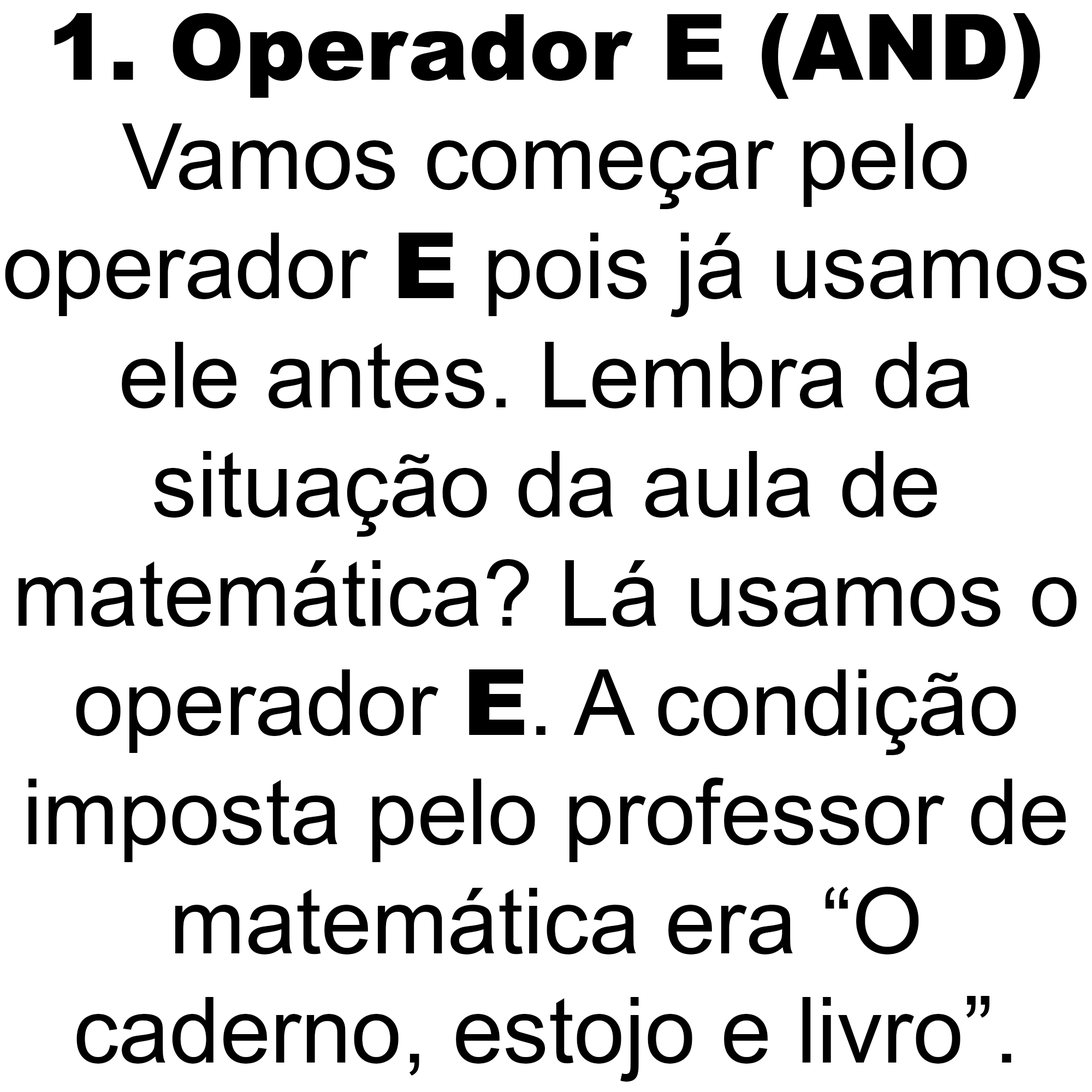
<style>
.page{position:relative;width:1092px;height:1092px;background:#ffffff}
.page>*{position:absolute;margin:0}
.t1{font:91px "ArialMT";color:#000000}
.t2{font:91px "Arial-Black";color:#000000}
</style>
<div class="page">
<p class="t1" style="left:5px;top:13px;width:1082px;height:1069px;text-align:center"><span class="t2">1. Operador E (AND)<br></span>Vamos começar pelo<br>operador <span class="t2">E</span> pois já usamos<br>ele antes. Lembra da<br>situação da aula de<br>matemática? Lá usamos o<br>operador <span class="t2">E</span>. A condição<br>imposta pelo professor de<br>matemática era “O<br>caderno, estojo e livro”.</p>
</div>
